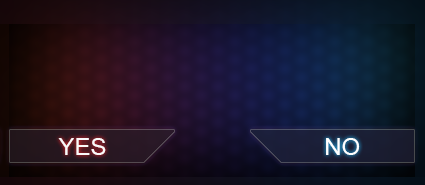
<style>
.page{position:relative;width:425px;height:185px}
.page>*{position:absolute;margin:0}
.t1{font:24px "ArialMT";color:#ffffff}
</style>
<div class="page">
<p class="t1" style="left:58px;top:138px;width:48px;height:17px;opacity:0.97">YES</p>
<p class="t1" style="left:326px;top:138px;width:34px;height:17px">NO</p>
</div>
